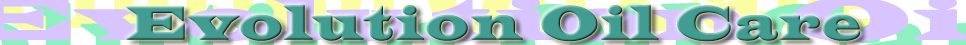
<style>
.page{position:relative;width:966px;height:45px}
.page>*{position:absolute;margin:0}
.t1{font:48px "LatinWide";letter-spacing:0.05em;color:#419c92;font-weight:bold;scale:0.9 1}
</style>
<div class="page">
<p class="t1" style="left:126px;top:4px;width:734px;height:38px">Evolution Oil Care</p>
</div>
